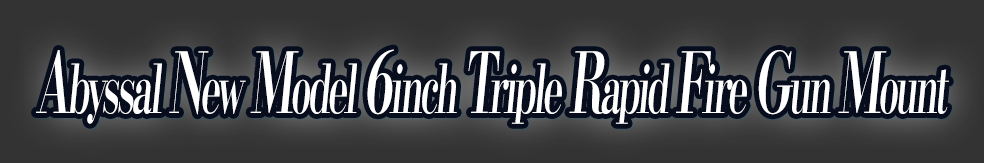
<style>
.page{position:relative;width:984px;height:163px;background:#333333}
.page>*{position:absolute;margin:0}
.t1{font:67.2px "KochoStd-Heavy";letter-spacing:-0.08em;color:#ffffff;font-style:italic;scale:0.55 1}
.t2{font:84px "KochoStd-Heavy";letter-spacing:-0.08em;color:#ffffff;font-style:italic;scale:0.55 1}
</style>
<div class="page">
<p class="t1" style="left:36px;top:49px;width:913px;height:75px"><span class="t2">A</span>byssal <span class="t2">N</span>ew <span class="t2">M</span>odel <span class="t2">6</span>inch <span class="t2">T</span>riple <span class="t2">R</span>apid <span class="t2">F</span>ire <span class="t2">G</span>un <span class="t2">M</span>ount</p>
</div>
